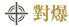
<style>
.page{position:relative;width:69px;height:27px;background:#ffffff}
.page>*{position:absolute;margin:0}
.t1{font:18px "RyuminPr6N-ExBold";color:#ae9442}
</style>
<div class="page">
<p class="t1" style="left:33px;top:4px;width:35px;height:18px">對爆</p>
</div>
